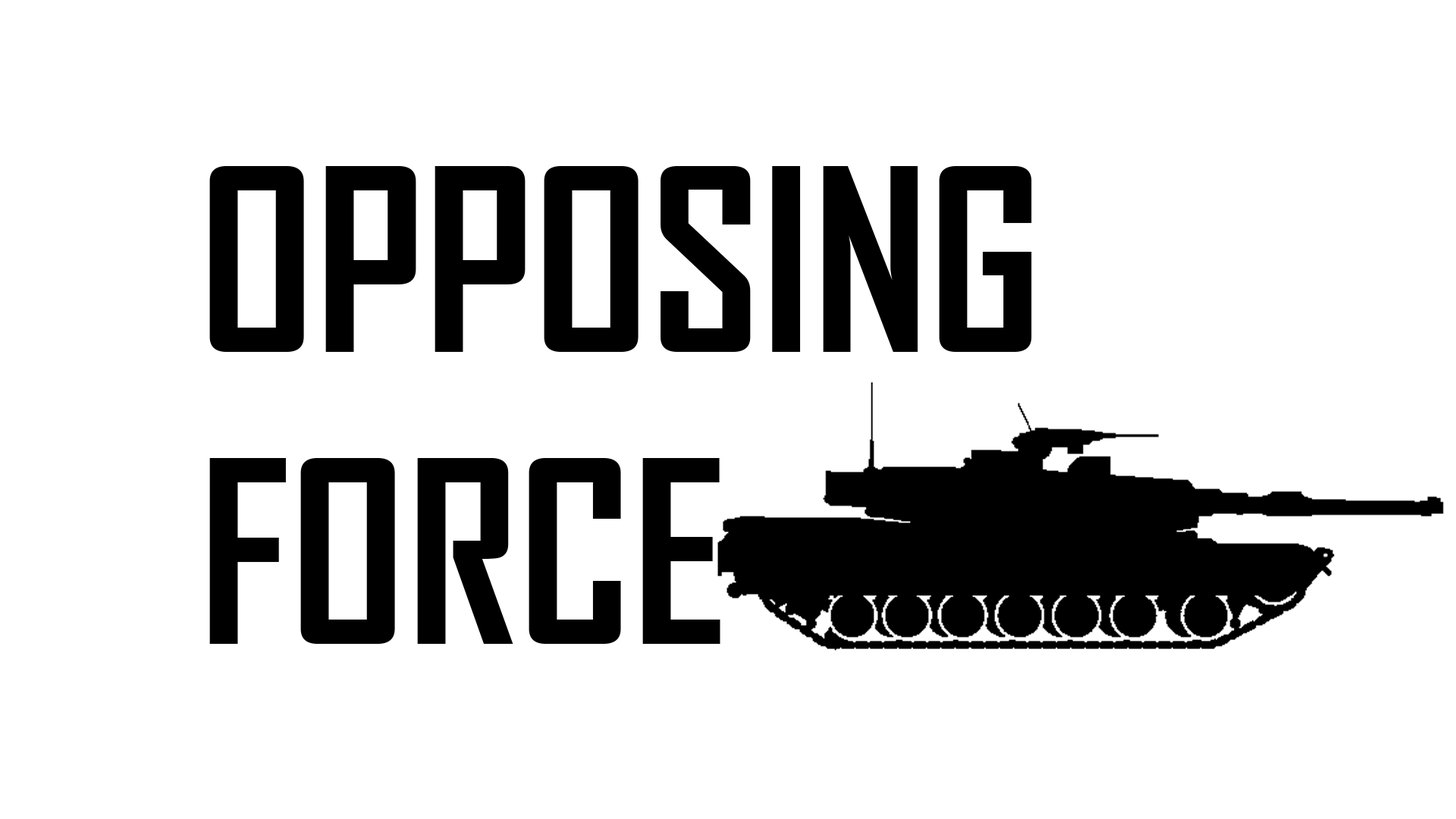
<style>
.page{position:relative;width:1456px;height:819px;background:#ffffff}
.page>*{position:absolute;margin:0}
.t1{font:243.3px "AgencyFB-Bold";color:#000000}
</style>
<div class="page">
<p class="t1" style="left:209px;top:166px;width:823px;height:478px">OPPOSING<br>FORCE</p>
</div>
